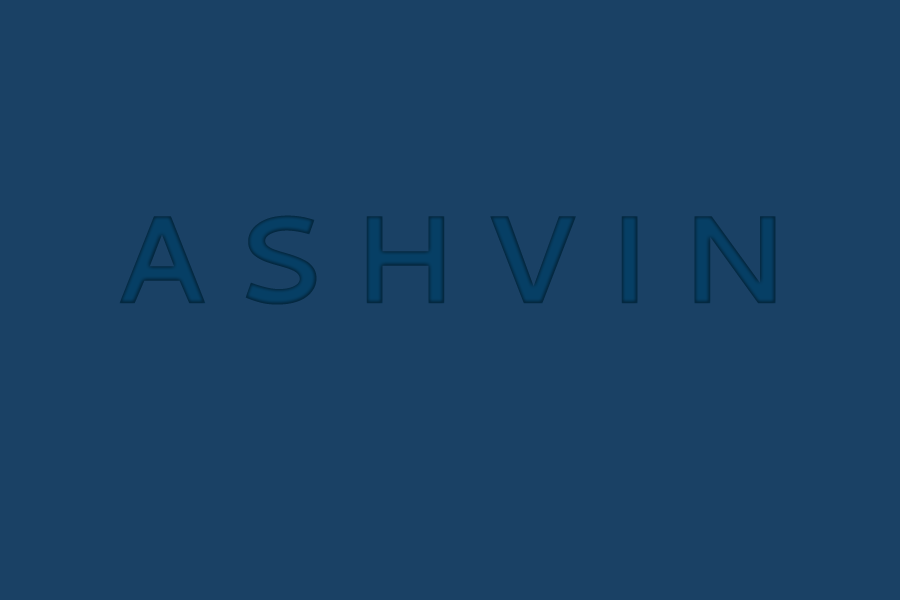
<style>
.page{position:relative;width:900px;height:600px;background:#1a4165}
.page>*{position:absolute;margin:0}
.t1{font:125px "Cantarell-Bold";letter-spacing:0.2em;color:#063d62}
</style>
<div class="page">
<p class="t1" style="left:119px;top:215px;width:657px;height:90px">ASHVIN</p>
</div>
